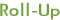
<style>
.page{position:relative;width:60px;height:20px;background:#ffffff}
.page>*{position:absolute;margin:0}
.t1{font:15.9px "ArchitecturePlain";color:#6ea337;scale:1.8 1}
</style>
<div class="page">
<p class="t1" style="left:0px;top:2px;width:60px;height:18px">Roll-Up</p>
</div>
